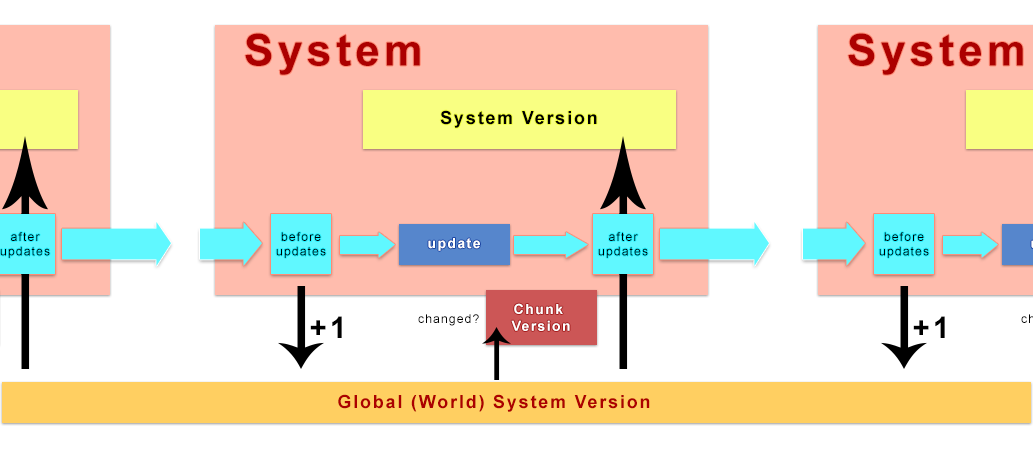
<style>
.page{position:relative;width:1033px;height:450px;background:#ffffff}
.page>*{position:absolute;margin:0}
.t1{font:43.7px "Arial-BoldMT";letter-spacing:0.1em;color:#ac0000}
.t2{font:18px "Arial-BoldMT";letter-spacing:0.1em;color:#000000}
.t3{font:12px "ArialMT";letter-spacing:0.1em;color:#000000}
.t4{font:14px "Arial-BoldMT";letter-spacing:0.1em;color:#ffffff}
.t5{font:30px "Arial-BoldMT";letter-spacing:0.1em;color:#000000}
.t6{font:18px "Arial-BoldMT";letter-spacing:0.1em;color:#ac0000}
</style>
<div class="page">
<p class="t1" style="left:245px;top:33px;width:175px;height:42px">System</p>
<p class="t1" style="left:848px;top:33px;width:175px;height:42px">System</p>
<p class="t2" style="left:440px;top:110px;width:157px;height:18px">System Version</p>
<p class="t3" style="left:0px;top:232px;width:50px;height:26px;text-align:center">after<br>updates</p>
<p class="t3" style="left:276px;top:232px;width:50px;height:26px;text-align:center">before<br>updates</p>
<p class="t3" style="left:598px;top:232px;width:50px;height:26px;text-align:center">after<br>updates</p>
<p class="t3" style="left:879px;top:232px;width:50px;height:26px;text-align:center">before<br>updates</p>
<p class="t4" style="left:428px;top:238px;width:52px;height:13px">update</p>
<p class="t4" style="left:511px;top:303px;width:59px;height:28px;text-align:center">Chunk <br>Version</p>
<p class="t5" style="left:310px;top:316px;width:32px;height:22px">+1</p>
<p class="t3" style="left:418px;top:314px;width:61px;height:12px">changed?</p>
<p class="t5" style="left:913px;top:316px;width:32px;height:22px">+1</p>
<p class="t6" style="left:338px;top:394px;width:312px;height:18px">Global (World) System Version</p>
</div>
